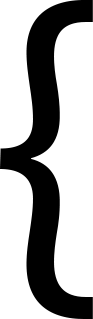
<style>
.page{position:relative;width:93px;height:319px;background:#ffffff}
.page>*{position:absolute;margin:0}
.t1{font:400px "MyriadPro-Regular";color:#000000}
</style>
<div class="page">
<p class="t1" style="left:0px;top:0px;width:93px;height:319px">{</p>
</div>
